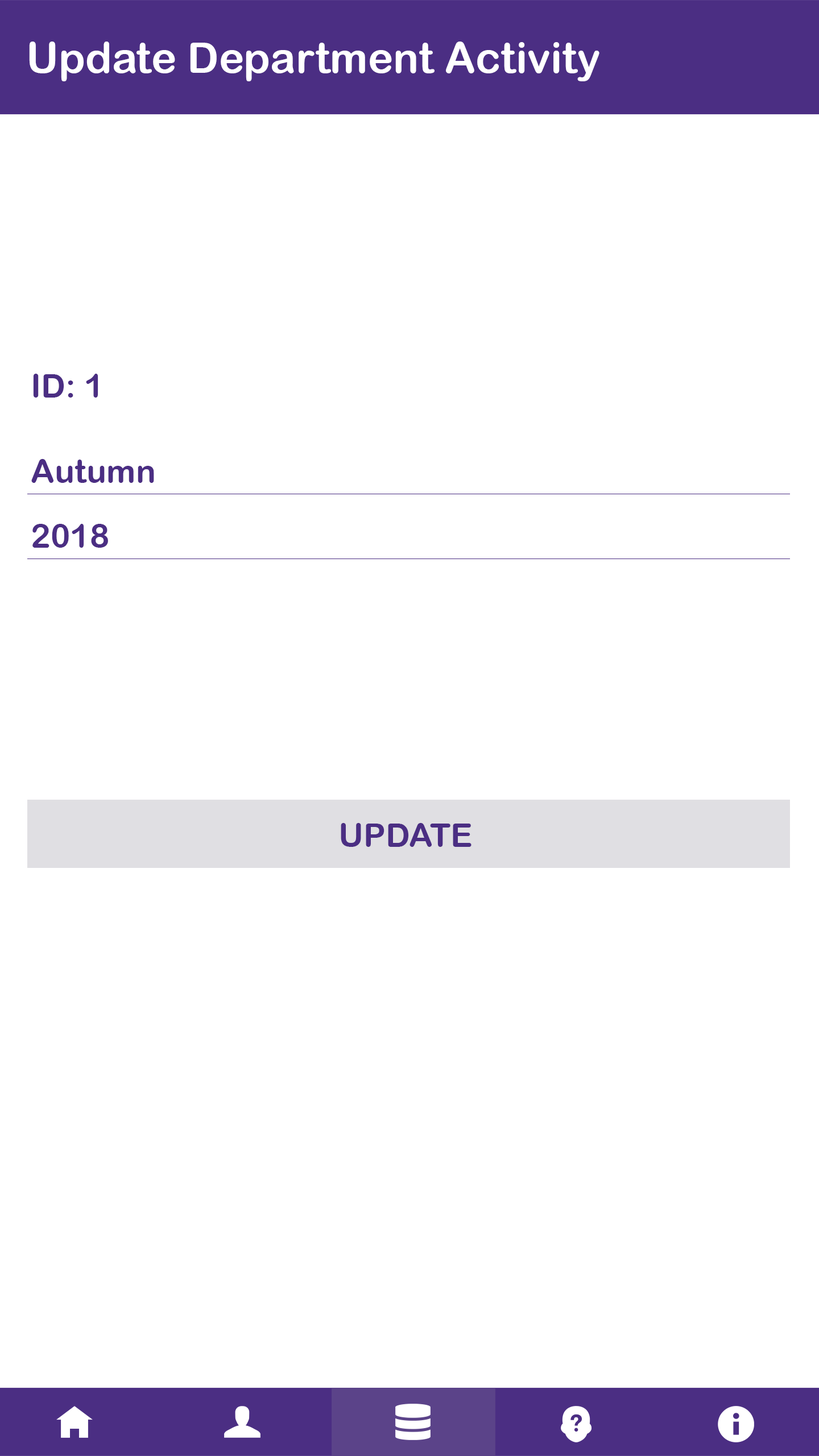
<style>
.page{position:relative;width:819px;height:1456px;background:#ffffff}
.page>*{position:absolute;margin:0}
.t1{font:42.7px "ArialRoundedMTBold";color:#ffffff}
.t2{font:33.2px "ArialRoundedMTBold";color:#4b2e83}
</style>
<div class="page">
<p class="t1" style="left:29px;top:42px;width:570px;height:39px">Update Department Activity</p>
<p class="t2" style="left:33px;top:374px;width:65px;height:24px">ID: 1</p>
<p class="t2" style="left:31px;top:459px;width:123px;height:24px">Autumn</p>
<p class="t2" style="left:32px;top:524px;width:76px;height:24px">2018</p>
<p class="t2" style="left:341px;top:823px;width:130px;height:24px">UPDATE</p>
</div>
